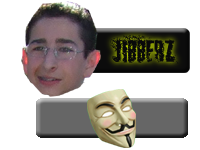
<style>
.page{position:relative;width:200px;height:150px;background:#ffffff}
.page>*{position:absolute;margin:0}
.t1{font:31.9px "SNIPER";color:#090909}
</style>
<div class="page">
<p class="t1" style="left:110px;top:35px;width:69px;height:29px">Jibberz</p>
</div>
